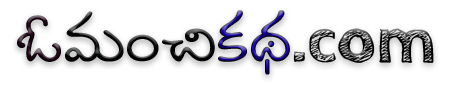
<style>
.page{position:relative;width:450px;height:85px;background:#ffffff}
.page>*{position:absolute;margin:0}
.t1{font:116.7px "NTR"}
.t2{font:116.7px "CabinSketch-Bold"}
</style>
<div class="page">
<p class="t1" style="left:17px;top:10px;width:417px;height:65px">ఓమంచికథ<span class="t2">.com</span></p>
</div>
